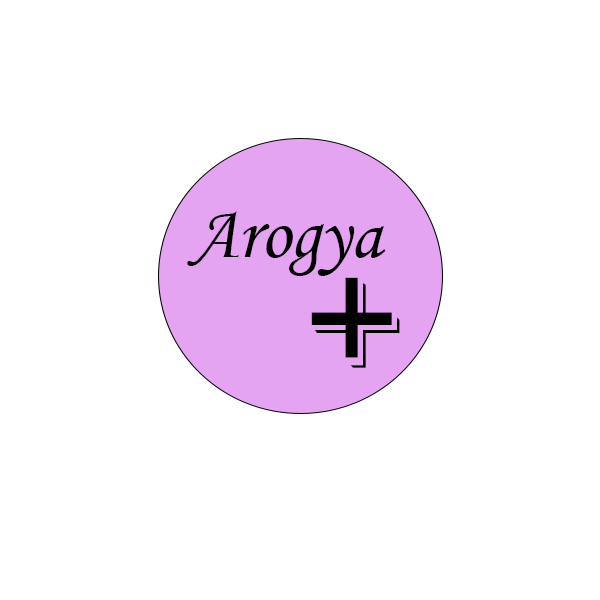
<style>
.page{position:relative;width:600px;height:600px;background:#ffffff}
.page>*{position:absolute;margin:0}
.t1{font:75px "MonotypeCorsiva";color:#000000}
.t2{font:200px "Algerian";color:#000000}
</style>
<div class="page">
<p class="t1" style="left:187px;top:211px;width:199px;height:65px">Arogya</p>
<p class="t2" style="left:311px;top:277px;width:89px;height:91px">+</p>
</div>
